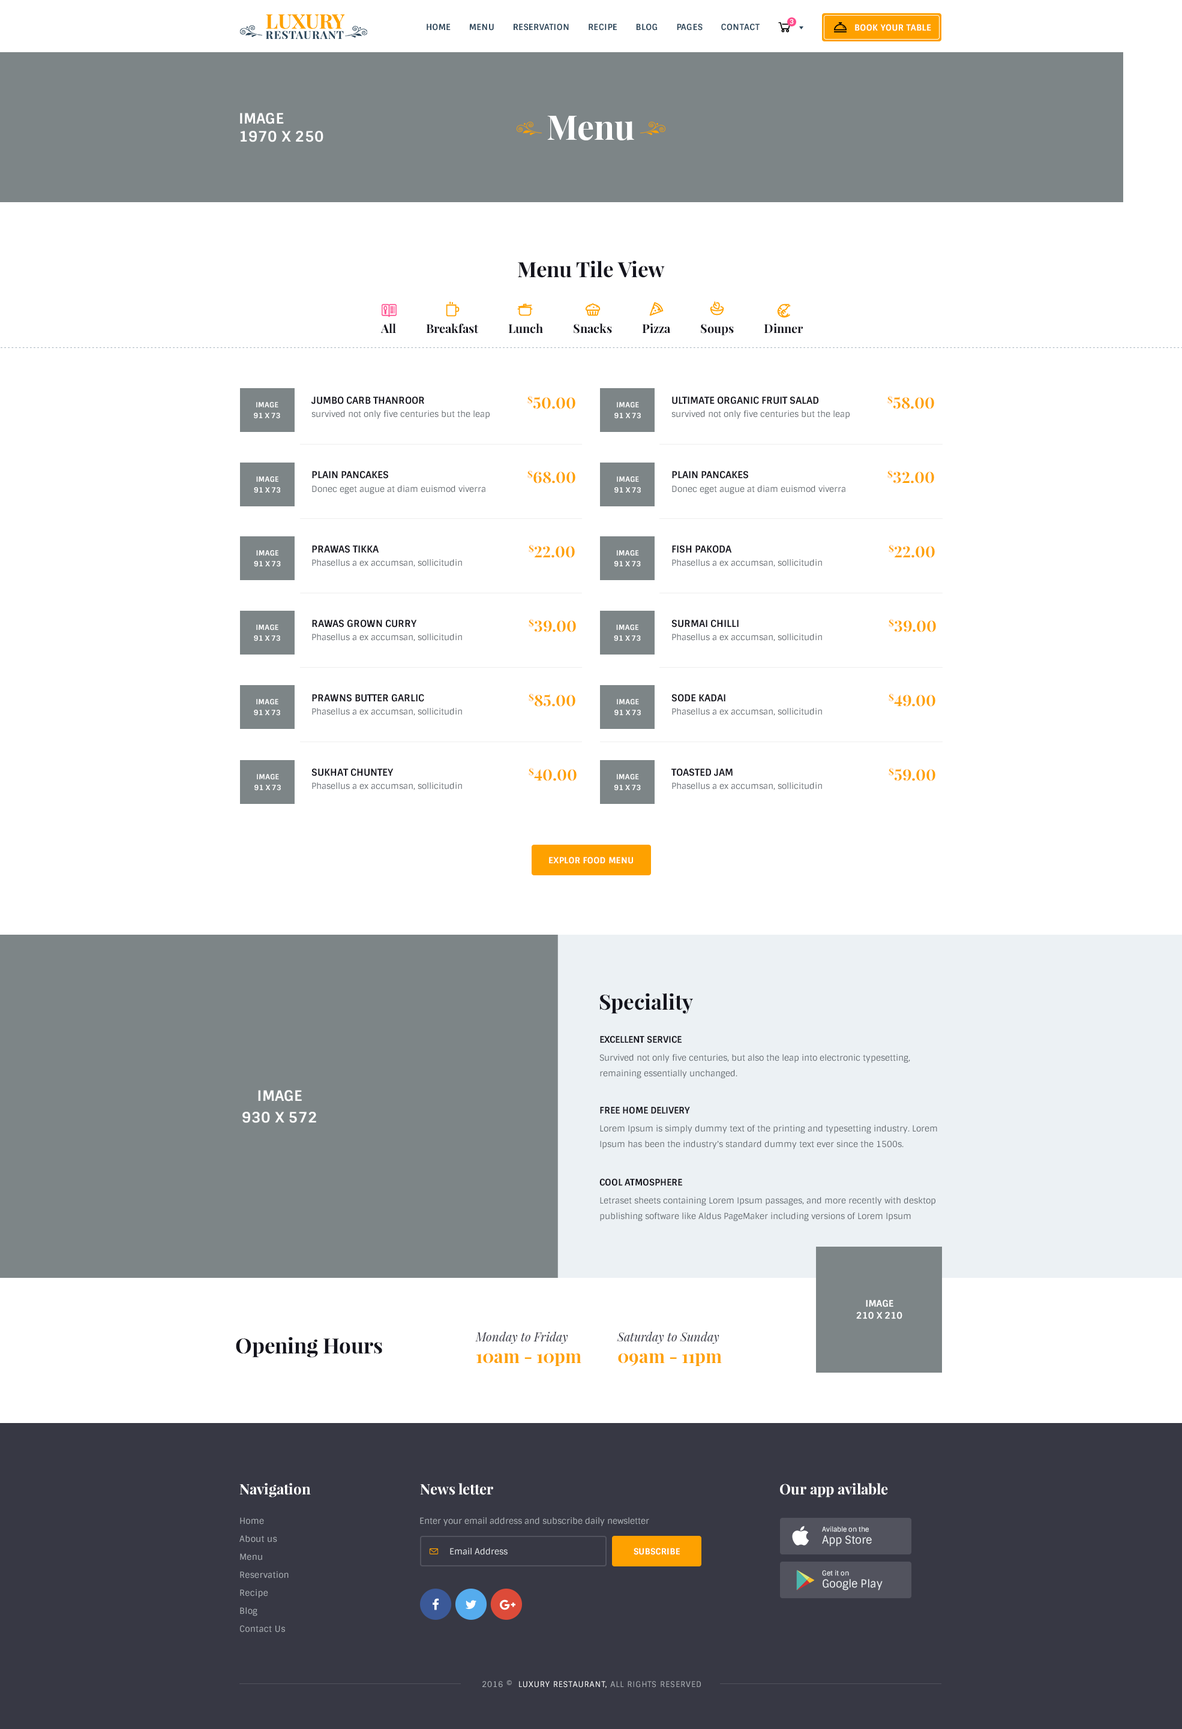
<style>
.page{position:relative;width:1182px;height:1729px;background:#ffffff}
.page>*{position:absolute;margin:0}
.t1{font:8.4px "Sintony-Bold";letter-spacing:0.025em;color:#2c465a;text-transform:uppercase}
.t2{font:6.6px "Sintony-Bold";letter-spacing:0.025em;color:#ffffff;text-transform:uppercase}
.t3{font:8.4px "Sintony-Bold";letter-spacing:0.025em;color:#ffffff;text-transform:uppercase}
.t4{font:14.4px/18px "Sintony-Bold";letter-spacing:0.005em;color:#ffffff;text-transform:uppercase}
.t5{font:33.6px "PlayfairDisplay-Bold";color:#ffffff}
.t6{font:21px "PlayfairDisplay-Bold";color:#14141d}
.t7{font:12px "PlayfairDisplay-Bold";color:#14141d}
.t8{font:9.6px "Sintony-Bold";color:#14141d;text-transform:uppercase}
.t9{font:15.6px "PlayfairDisplay-Bold";color:#fea100;text-transform:uppercase}
.t10{font:7.2px/10.8px "Sintony-Bold";letter-spacing:0.005em;color:#ffffff;text-transform:uppercase}
.t11{font:8.4px "Sintony";color:#5c6369}
.t12{font:9px "Sintony-Bold";color:#14141d;text-transform:uppercase}
.t13{font:8.4px/15.6px "Sintony";color:#5c6369}
.t14{font:14.4px/21.6px "Sintony-Bold";letter-spacing:0.005em;color:#ffffff;text-transform:uppercase}
.t15{font:9px/12px "Sintony-Bold";letter-spacing:0.005em;color:#ffffff;text-transform:uppercase}
.t16{font:12px "PlayfairDisplay-Italic";color:#373844}
.t17{font:18px "PlayfairDisplay-Bold";color:#fea100}
.t18{font:14.4px "PlayfairDisplay-Bold";color:#ffffff}
.t19{font:8.4px/18px "Sintony";letter-spacing:0.025em;color:#adb2b7}
.t20{font:8.4px "Sintony";color:#adb2b7}
.t21{font:6.6px/12px "Sintony";color:#edf1f3}
.t22{font:10.8px/12px "Sintony";color:#edf1f3}
.t23{font:8.4px "Sintony";color:#e6e9eb}
.t24{font:7.8px "Sintony";letter-spacing:0.075em;color:#adb2b7;text-transform:uppercase}
.t25{font:7.8px "Sintony";letter-spacing:0.075em;color:#ffffff;text-transform:uppercase}
</style>
<div class="page">
<p class="t1" style="left:427px;top:23px;width:333px;height:8px">Home       menu       reservation       recipe       blog       Pages       contact</p>
<p class="t2" style="left:790px;top:19px;width:4px;height:6px">3</p>
<p class="t3" style="left:855px;top:24px;width:76px;height:7px">Book your table</p>
<p class="t4" style="left:240px;top:113px;width:83px;height:29px">Image<br>1970 x 250</p>
<p class="t5" style="left:547px;top:116px;width:87px;height:24px">Menu</p>
<p class="t6" style="left:518px;top:260px;width:147px;height:18px">Menu Tile View</p>
<p class="t7" style="left:380px;top:323px;width:423px;height:12px">All          Breakfast          Lunch          Snacks          Pizza          Soups          Dinner</p>
<p class="t8" style="left:311px;top:397px;width:113px;height:7px">jumbo carb thanroor</p>
<p class="t9" style="left:527px;top:395px;width:48px;height:14px">$50.00</p>
<p class="t8" style="left:672px;top:397px;width:146px;height:7px">Ultimate organic fruit salad</p>
<p class="t9" style="left:887px;top:395px;width:47px;height:14px">$58.00</p>
<p class="t10" style="left:254px;top:402px;width:26px;height:17px;text-align:center">Image<br>91 x 73</p>
<p class="t11" style="left:311px;top:410px;width:179px;height:9px">survived not only five centuries but the leap</p>
<p class="t10" style="left:614px;top:402px;width:27px;height:17px;text-align:center">Image<br>91 x 73</p>
<p class="t11" style="left:671px;top:410px;width:179px;height:9px">survived not only five centuries but the leap</p>
<p class="t8" style="left:312px;top:471px;width:76px;height:8px">Plain pancakes</p>
<p class="t9" style="left:527px;top:470px;width:48px;height:14px">$68.00</p>
<p class="t8" style="left:672px;top:471px;width:76px;height:8px">Plain pancakes</p>
<p class="t9" style="left:887px;top:470px;width:47px;height:14px">$32.00</p>
<p class="t10" style="left:254px;top:476px;width:27px;height:17px;text-align:center">Image<br>91 x 73</p>
<p class="t11" style="left:312px;top:485px;width:173px;height:9px">Donec eget augue at diam euismod viverra</p>
<p class="t10" style="left:614px;top:476px;width:27px;height:17px;text-align:center">Image<br>91 x 73</p>
<p class="t11" style="left:672px;top:485px;width:173px;height:9px">Donec eget augue at diam euismod viverra</p>
<p class="t8" style="left:312px;top:545px;width:67px;height:8px">pRawas tikka</p>
<p class="t9" style="left:529px;top:544px;width:46px;height:14px">$22.00</p>
<p class="t8" style="left:672px;top:545px;width:60px;height:8px">Fish pakoda</p>
<p class="t9" style="left:889px;top:544px;width:46px;height:14px">$22.00</p>
<p class="t10" style="left:254px;top:550px;width:27px;height:17px;text-align:center">Image<br>91 x 73</p>
<p class="t10" style="left:614px;top:550px;width:27px;height:17px;text-align:center">Image<br>91 x 73</p>
<p class="t11" style="left:312px;top:559px;width:150px;height:8px">Phasellus a ex accumsan, sollicitudin</p>
<p class="t11" style="left:672px;top:559px;width:150px;height:8px">Phasellus a ex accumsan, sollicitudin</p>
<p class="t10" style="left:254px;top:625px;width:26px;height:16px;text-align:center">Image<br>91 x 73</p>
<p class="t8" style="left:312px;top:620px;width:105px;height:8px">Rawas grown curry</p>
<p class="t9" style="left:529px;top:619px;width:47px;height:13px">$39.00</p>
<p class="t10" style="left:614px;top:625px;width:27px;height:16px;text-align:center">Image<br>91 x 73</p>
<p class="t8" style="left:671px;top:620px;width:68px;height:8px">Surmai chilli</p>
<p class="t9" style="left:889px;top:619px;width:47px;height:13px">$39.00</p>
<p class="t11" style="left:312px;top:634px;width:150px;height:7px">Phasellus a ex accumsan, sollicitudin</p>
<p class="t11" style="left:672px;top:634px;width:150px;height:7px">Phasellus a ex accumsan, sollicitudin</p>
<p class="t10" style="left:254px;top:699px;width:26px;height:17px;text-align:center">Image<br>91 x 73</p>
<p class="t8" style="left:312px;top:694px;width:112px;height:8px">Prawns butter garlic</p>
<p class="t9" style="left:529px;top:693px;width:46px;height:14px">$85.00</p>
<p class="t10" style="left:614px;top:699px;width:27px;height:17px;text-align:center">Image<br>91 x 73</p>
<p class="t8" style="left:671px;top:694px;width:54px;height:8px">Sode kadai</p>
<p class="t9" style="left:889px;top:693px;width:46px;height:14px">$49.00</p>
<p class="t11" style="left:312px;top:708px;width:150px;height:8px">Phasellus a ex accumsan, sollicitudin</p>
<p class="t11" style="left:672px;top:708px;width:150px;height:8px">Phasellus a ex accumsan, sollicitudin</p>
<p class="t10" style="left:254px;top:774px;width:27px;height:17px;text-align:center">Image<br>91 x 73</p>
<p class="t8" style="left:311px;top:769px;width:83px;height:7px">Sukhat chuntey</p>
<p class="t9" style="left:529px;top:767px;width:48px;height:14px">$40.00</p>
<p class="t10" style="left:614px;top:774px;width:27px;height:17px;text-align:center">Image<br>91 x 73</p>
<p class="t8" style="left:671px;top:769px;width:62px;height:7px">Toasted jam</p>
<p class="t9" style="left:889px;top:767px;width:46px;height:14px">$59.00</p>
<p class="t11" style="left:312px;top:782px;width:150px;height:8px">Phasellus a ex accumsan, sollicitudin</p>
<p class="t11" style="left:672px;top:782px;width:150px;height:8px">Phasellus a ex accumsan, sollicitudin</p>
<p class="t3" style="left:549px;top:857px;width:84px;height:7px">Explor food menu</p>
<p class="t6" style="left:600px;top:993px;width:93px;height:21px">Speciality</p>
<p class="t12" style="left:600px;top:1036px;width:82px;height:7px">EXCELLENT SERVICE</p>
<p class="t13" style="left:599px;top:1054px;width:311px;height:25px">Survived not only five centuries, but also the leap into electronic typesetting, remaining essentially unchanged.</p>
<p class="t14" style="left:242px;top:1090px;width:74px;height:33px;text-align:center">Image<br>930 x 572</p>
<p class="t12" style="left:600px;top:1106px;width:90px;height:8px">FREE Home DELIVERY</p>
<p class="t13" style="left:600px;top:1125px;width:337px;height:25px">Lorem Ipsum is simply dummy text of the printing and typesetting industry. Lorem Ipsum has been the industry's standard dummy text ever since the 1500s.</p>
<p class="t12" style="left:599px;top:1178px;width:84px;height:8px">Cool atmosphere</p>
<p class="t13" style="left:600px;top:1197px;width:335px;height:25px">Letraset sheets containing Lorem Ipsum passages, and more recently with desktop publishing software like Aldus PageMaker including versions of Lorem Ipsum</p>
<p class="t15" style="left:856px;top:1300px;width:46px;height:19px;text-align:center">Image<br>210 x 210</p>
<p class="t6" style="left:236px;top:1337px;width:146px;height:21px">Opening Hours</p>
<p class="t16" style="left:475px;top:1331px;width:106px;height:35px">Monday to Friday<br><span class="t17">10am - 10pm</span></p>
<p class="t16" style="left:617px;top:1331px;width:105px;height:35px">Saturday to Sunday<br><span class="t17">09am - 11pm</span></p>
<p class="t18" style="left:239px;top:1483px;width:72px;height:15px">Navigation</p>
<p class="t18" style="left:420px;top:1483px;width:73px;height:12px">News letter</p>
<p class="t18" style="left:780px;top:1483px;width:108px;height:15px">Our app avilable</p>
<p class="t19" style="left:239px;top:1517px;width:50px;height:116px">Home<br>About us<br>Menu<br>Reservation<br>Recipe<br>Blog<br>Contact Us</p>
<p class="t20" style="left:420px;top:1517px;width:229px;height:9px">Enter your email address and subscribe daily newsletter</p>
<p class="t21" style="left:822px;top:1526px;width:50px;height:21px">Avilable on the<br><span class="t22">App Store</span></p>
<p class="t23" style="left:450px;top:1548px;width:58px;height:7px">Email Address</p>
<p class="t3" style="left:634px;top:1548px;width:46px;height:7px">Subscribe</p>
<p class="t22" style="left:822px;top:1570px;width:61px;height:21px"><span class="t21">Get it on<br></span>Google Play</p>
<p class="t24" style="left:482px;top:1680px;width:219px;height:8px">2016 ©  <span class="t25">Luxury RestaurAnt,</span> All rights reserved</p>
</div>
